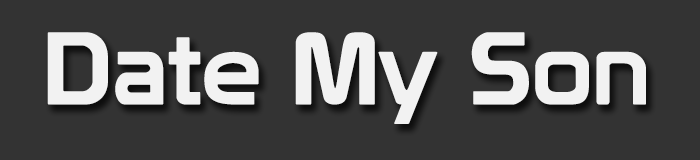
<style>
.page{position:relative;width:700px;height:160px;background:#333333}
.page>*{position:absolute;margin:0}
.t1{font:100.6px "Prototype";color:#f2f2f2;scale:1.04 1}
</style>
<div class="page">
<p class="t1" style="left:47px;top:32px;width:599px;height:92px">Date My Son</p>
</div>
